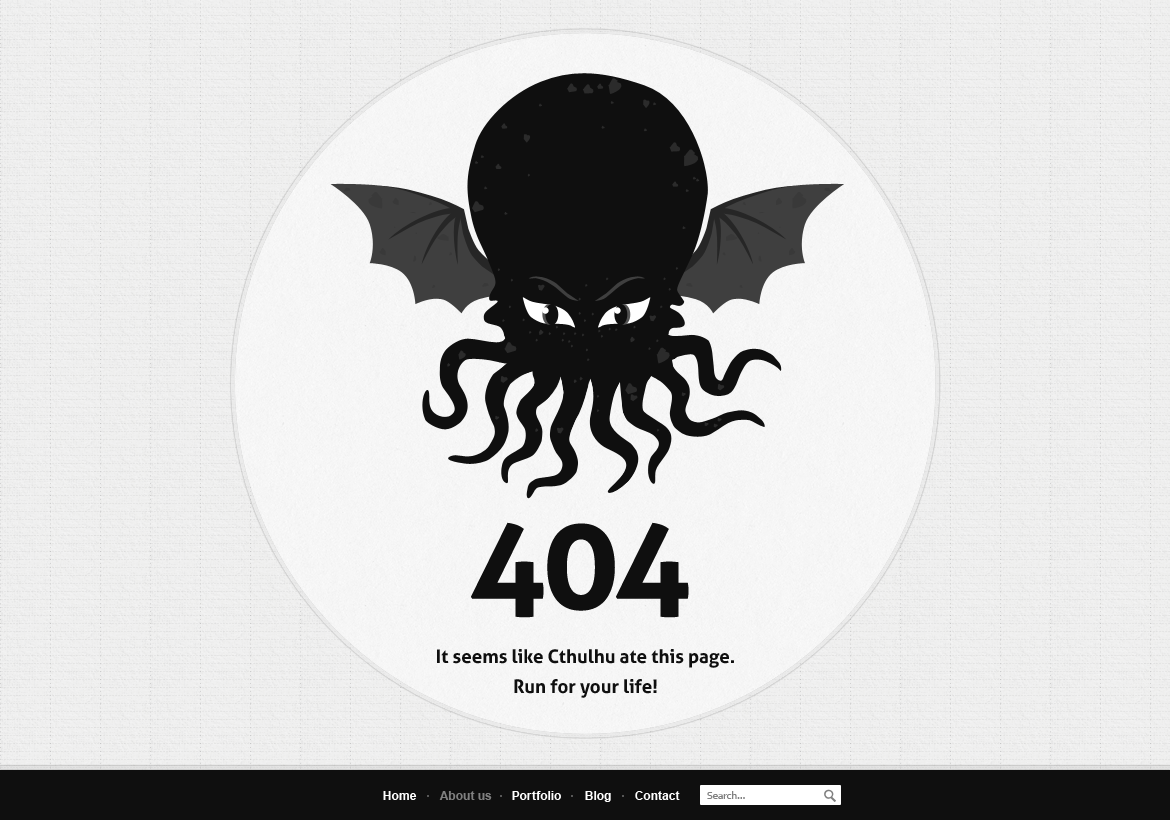
<style>
.page{position:relative;width:1170px;height:820px}
.page>*{position:absolute;margin:0}
.t1{font:129.2px "Aller-Bold";letter-spacing:-0.025em;color:#000000}
.t2{font:18.8px "Aller-Bold";color:#000000}
.t3{font:12px "Arial-BoldMT";color:#ffffff}
.t4{font:12px "Arial-BoldMT";color:#808080}
.t5{font:10px "Tahoma";color:#808080}
</style>
<div class="page">
<p class="t1" style="left:471px;top:522px;width:218px;height:96px">404</p>
<p class="t2" style="left:437px;top:649px;width:297px;height:19px">It seems like Cthulhu ate this page.</p>
<p class="t2" style="left:514px;top:679px;width:143px;height:19px">Run for your life!</p>
<p class="t3" style="left:383px;top:791px;width:297px;height:11px">Home       <span class="t4">About us  </span>    Portfolio       Blog       Contact</p>
<p class="t5" style="left:707px;top:791px;width:38px;height:8px">Search...</p>
</div>
